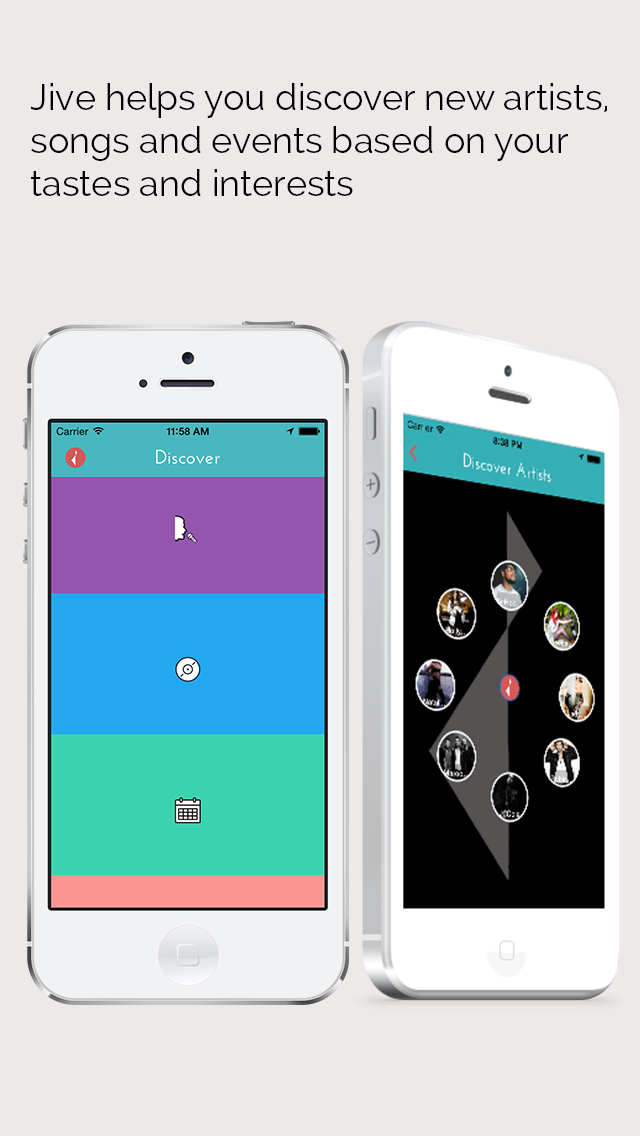
<style>
.page{position:relative;width:640px;height:1136px;background:#ede9e9}
.page>*{position:absolute;margin:0}
.t1{font:36px "Raleway-Regular";color:#000000}
</style>
<div class="page">
<p class="t1" style="left:30px;top:83px;width:577px;height:113px">Jive helps you discover new artists,<br>songs and events based on your<br>tastes and interests</p>
</div>
